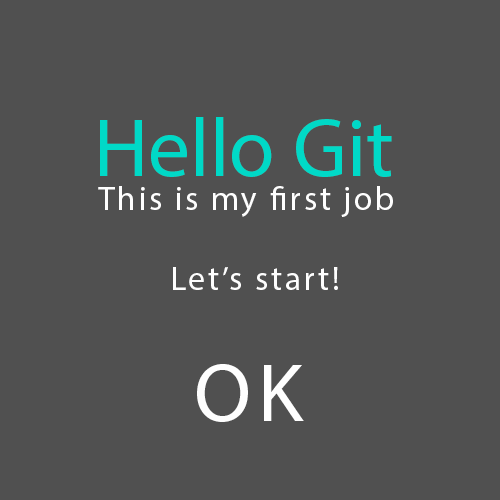
<style>
.page{position:relative;width:500px;height:500px;background:#505050}
.page>*{position:absolute;margin:0}
.t1{font:83.3px "MyriadPro-Regular";color:#00d9c7}
.t2{font:33.6px "MyriadPro-Regular";letter-spacing:0.08em;color:#fefefe}
.t3{font:83.3px "MyriadPro-Regular";letter-spacing:0.08em;color:#fefefe}
</style>
<div class="page">
<p class="t1" style="left:100px;top:117px;width:292px;height:60px">Hello Git</p>
<p class="t2" style="left:98px;top:186px;width:295px;height:31px">This is my first job</p>
<p class="t2" style="left:173px;top:267px;width:165px;height:23px">Let’s start!</p>
<p class="t3" style="left:197px;top:364px;width:107px;height:58px">OK</p>
</div>
